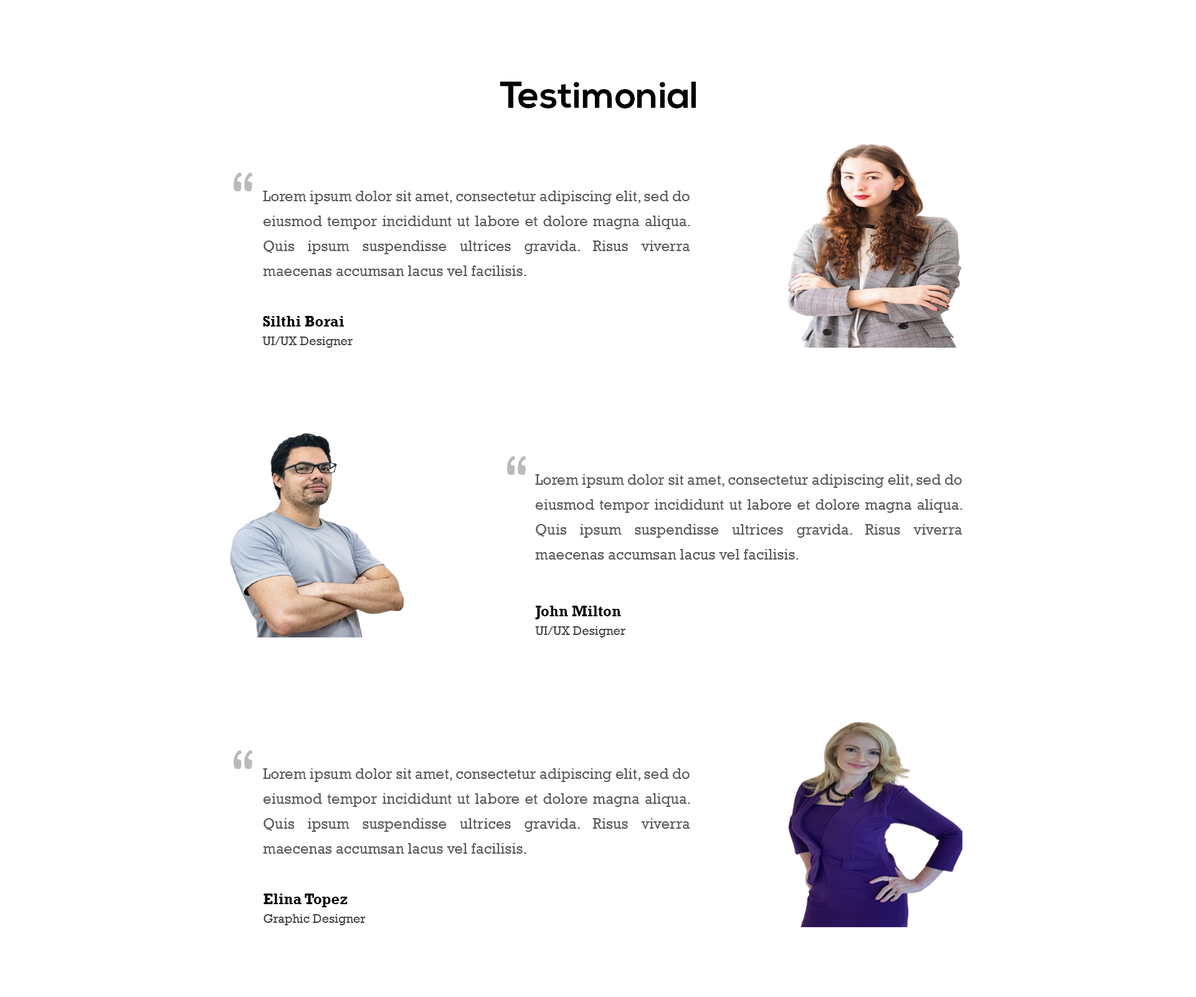
<style>
.page{position:relative;width:1196px;height:997px;background:#ffffff}
.page>*{position:absolute;margin:0}
.t1{font:37.4px "NexaBold";color:#000000}
.t2{font:15px/24.9px "Rockwell";color:#5a5858}
.t3{font:12.5px/18.7px "Rockwell";color:#454444}
.t4{font:15px/18.7px "Rockwell-Bold";color:#080201}
</style>
<div class="page">
<p class="t1" style="left:500px;top:82px;width:196px;height:26px">Testimonial</p>
<p class="t2" style="left:263px;top:191px;width:427px;height:85px;text-align:justify">Lorem ipsum dolor sit amet, consectetur adipiscing elit, sed do eiusmod tempor incididunt ut labore et dolore magna aliqua. Quis ipsum suspendisse ultrices gravida. Risus viverra maecenas accumsan lacus vel facilisis.</p>
<p class="t3" style="left:262px;top:316px;width:91px;height:32px;text-align:justify"><span class="t4">Silthi Borai<br></span>UI/UX Designer</p>
<p class="t2" style="left:535px;top:474px;width:428px;height:85px;text-align:justify">Lorem ipsum dolor sit amet, consectetur adipiscing elit, sed do eiusmod tempor incididunt ut labore et dolore magna aliqua. Quis ipsum suspendisse ultrices gravida. Risus viverra maecenas accumsan lacus vel facilisis.</p>
<p class="t3" style="left:535px;top:606px;width:91px;height:31px;text-align:justify"><span class="t4">John Milton<br></span>UI/UX Designer</p>
<p class="t2" style="left:263px;top:768px;width:427px;height:86px;text-align:justify">Lorem ipsum dolor sit amet, consectetur adipiscing elit, sed do eiusmod tempor incididunt ut labore et dolore magna aliqua. Quis ipsum suspendisse ultrices gravida. Risus viverra maecenas accumsan lacus vel facilisis.</p>
<p class="t3" style="left:264px;top:893px;width:102px;height:32px;text-align:justify"><span class="t4">Elina Topez<br></span>Graphic Designer</p>
</div>
